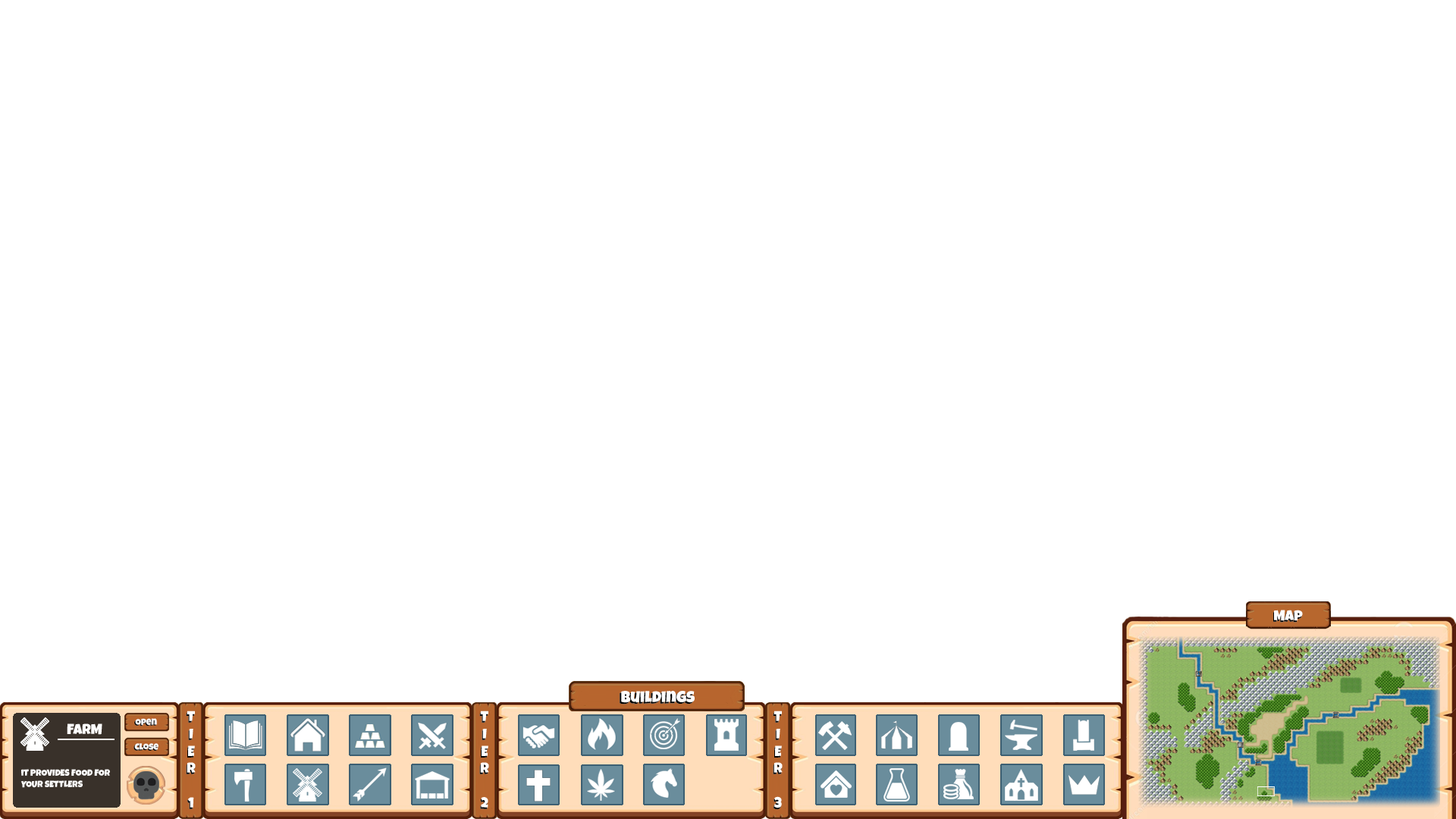
<style>
.page{position:relative;width:1456px;height:819px;background:#ffffff}
.page>*{position:absolute;margin:0}
.t1{font:14.4px "LuckiestGuy-Regular";color:#ffffff}
.t2{font:15.9px "LuckiestGuy-Regular";color:#ffffff}
.t3{font:9.1px "LuckiestGuy-Regular";color:#ffffff}
</style>
<div class="page">
<p class="t1" style="left:1274px;top:610px;width:29px;height:11px">Map</p>
<p class="t2" style="left:621px;top:691px;width:74px;height:12px">Buildings</p>
<p class="t1" style="left:187px;top:711px;width:9px;height:97px;text-align:center">T<br>I <br>E<br>R <br><br>1</p>
<p class="t1" style="left:480px;top:711px;width:9px;height:97px;text-align:center">T<br>I <br>E<br>R <br><br>2</p>
<p class="t1" style="left:773px;top:711px;width:10px;height:97px;text-align:center">T<br>I <br>E<br>R <br><br>3</p>
<p class="t1" style="left:67px;top:723px;width:35px;height:12px">FARM</p>
<p class="t3" style="left:20px;top:769px;width:90px;height:19px">iT PROVIDES FOOD FOR YOUR SETTLERS</p>
</div>
